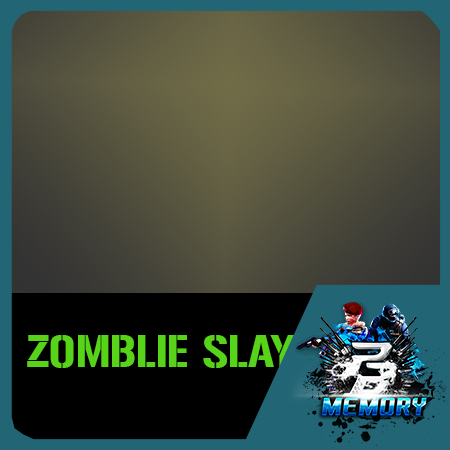
<style>
.page{position:relative;width:450px;height:450px}
.page>*{position:absolute;margin:0}
.t1{font:40px "Gunplay-Regular";color:#57d419}
</style>
<div class="page">
<p class="t1" style="left:27px;top:335px;width:315px;height:33px">ZOMBLIE SLAYER</p>
</div>
